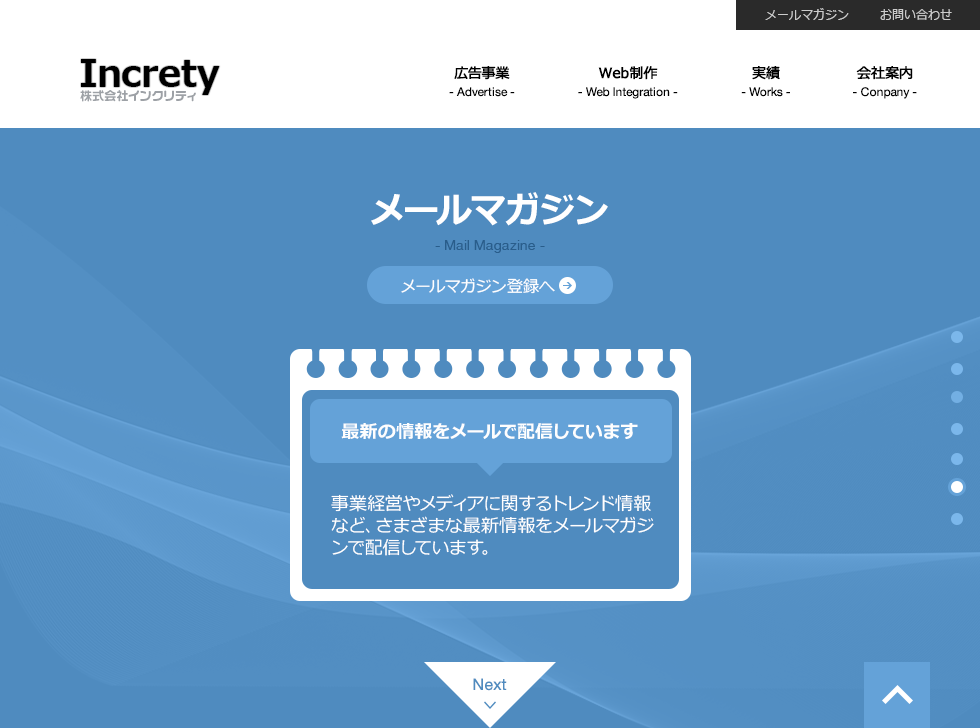
<style>
.page{position:relative;width:980px;height:728px;background:#4f8bbf}
.page>*{position:absolute;margin:0}
.t1{font:12px "Meiryo";color:#cccccc}
.t2{font:36.6px "Meiryo-Bold";color:#000000}
.t3{font:14px "Meiryo";color:#000000;font-weight:bold}
.t4{font:12px "HelveticaNeue";color:#000000}
.t5{font:12px "VD-LogoMaru-Extra-G";color:#9da1a6}
.t6{font:36px "Meiryo-Bold";color:#ffffff}
.t7{font:14px "HelveticaNeue";color:#295d8b}
.t8{font:16px "Meiryo";color:#ffffff}
.t9{font:18px "Meiryo-Bold";color:#fefefe}
.t10{font:18px/22px "Meiryo";color:#ffffff}
.t11{font:16px "HelveticaNeue";color:#4f8bbf}
</style>
<div class="page">
<p class="t1" style="left:765px;top:8px;width:84px;height:12px">メールマガジン</p>
<p class="t1" style="left:880px;top:9px;width:72px;height:11px">お問い合わせ</p>
<p class="t2" style="left:81px;top:59px;width:139px;height:36px">Increty</p>
<p class="t3" style="left:454px;top:66px;width:56px;height:14px">広告事業</p>
<p class="t3" style="left:598px;top:66px;width:60px;height:14px">Web制作</p>
<p class="t3" style="left:752px;top:66px;width:28px;height:14px">実績</p>
<p class="t3" style="left:856px;top:66px;width:57px;height:14px">会社案内</p>
<p class="t4" style="left:449px;top:87px;width:66px;height:10px">- Advertise -</p>
<p class="t4" style="left:578px;top:87px;width:100px;height:12px">- Web Integration -</p>
<p class="t4" style="left:741px;top:87px;width:49px;height:10px">- Works -</p>
<p class="t4" style="left:853px;top:87px;width:64px;height:12px">- Conpany -</p>
<p class="t5" style="left:80px;top:90px;width:116px;height:12px">株式会社インクリティ</p>
<p class="t6" style="left:371px;top:192px;width:237px;height:34px">メールマガジン</p>
<p class="t7" style="left:435px;top:240px;width:110px;height:13px">- Mail Magazine -</p>
<p class="t8" style="left:401px;top:278px;width:154px;height:16px">メールマガジン登録へ</p>
<p class="t9" style="left:341px;top:423px;width:297px;height:16px">最新の情報をメールで配信しています</p>
<p class="t10" style="left:331px;top:494px;width:323px;height:62px">事業経営やメディアに関するトレンド情報など、さまざまな最新情報をメールマガジンで配信しています。</p>
<p class="t11" style="left:473px;top:678px;width:34px;height:13px">Next</p>
</div>
